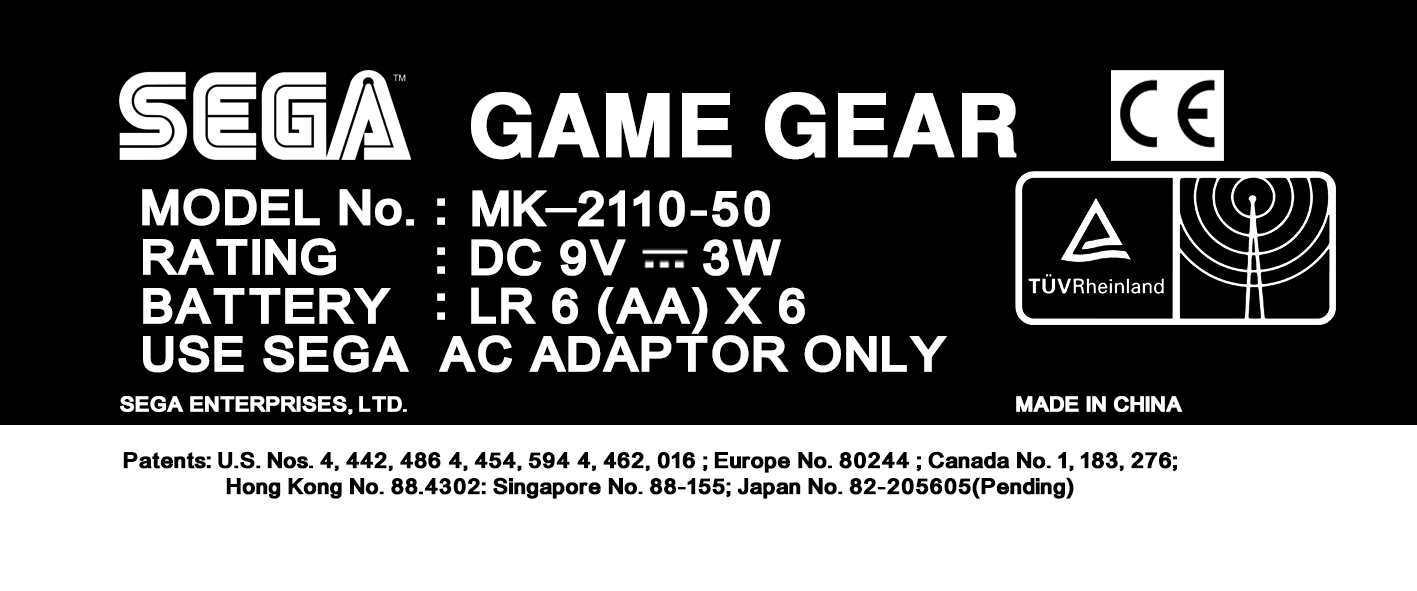
<style>
.page{position:relative;width:1417px;height:591px;background:#000000}
.page>*{position:absolute;margin:0}
.t1{font:86.4px "NimbusSanL-Bol";color:#ffffff;font-weight:bold}
.t2{font:48.4px "ER-UniversKOI-8Bold";color:#ffffff;font-weight:bold}
.t3{font:48.3px "ER-UniversKOI-8Bold";color:#ffffff;font-weight:bold}
.t4{font:20.8px "ER-UniversKOI-8Bold";color:#ffffff;font-weight:bold}
.t5{font:21.7px "ER-UniversKOI-8Bold";color:#000000;font-weight:bold}
</style>
<div class="page">
<p class="t1" style="left:471px;top:92px;width:546px;height:68px">GAME GEAR</p>
<p class="t2" style="left:142px;top:188px;width:272px;height:38px">MODEL No.</p>
<p class="t3" style="left:437px;top:198px;width:8px;height:27px">:</p>
<p class="t3" style="left:472px;top:190px;width:298px;height:37px">MK  2110-50</p>
<p class="t3" style="left:545px;top:208px;width:32px;height:5px">_</p>
<p class="t3" style="left:143px;top:238px;width:193px;height:38px">RATING</p>
<p class="t3" style="left:471px;top:238px;width:310px;height:38px">DC 9V     3W</p>
<p class="t3" style="left:437px;top:247px;width:8px;height:27px">:</p>
<p class="t3" style="left:143px;top:288px;width:248px;height:36px">BATTERY</p>
<p class="t3" style="left:437px;top:293px;width:8px;height:27px">:</p>
<p class="t3" style="left:471px;top:287px;width:334px;height:47px">LR 6 (AA) X 6</p>
<p class="t3" style="left:143px;top:335px;width:804px;height:38px">USE SEGA  AC ADAPTOR ONLY</p>
<p class="t4" style="left:120px;top:396px;width:287px;height:19px">SEGA ENTERPRISES, LTD.</p>
<p class="t4" style="left:1016px;top:396px;width:167px;height:16px">MADE IN CHINA</p>
<p class="t5" style="left:123px;top:451px;width:1054px;height:48px;text-align:center">Patents: U.S. Nos. 4, 442, 486 4, 454, 594 4, 462, 016 ; Europe No. 80244 ; Canada No. 1, 183, 276; Hong Kong No. 88.4302: Singapore No. 88-155; Japan No. 82-205605(Pending)</p>
</div>
